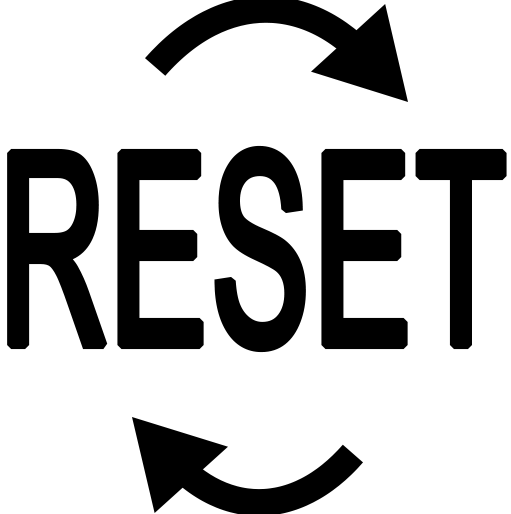
<style>
.page{position:relative;width:511px;height:514px;background:#ffffff}
.page>*{position:absolute;margin:0}
.t1{font:268.4px "ArialNarrow";color:#000000;font-weight:bold;scale:0.66 1}
</style>
<div class="page">
<p class="t1" style="left:7px;top:145px;width:500px;height:208px">RESET</p>
</div>
